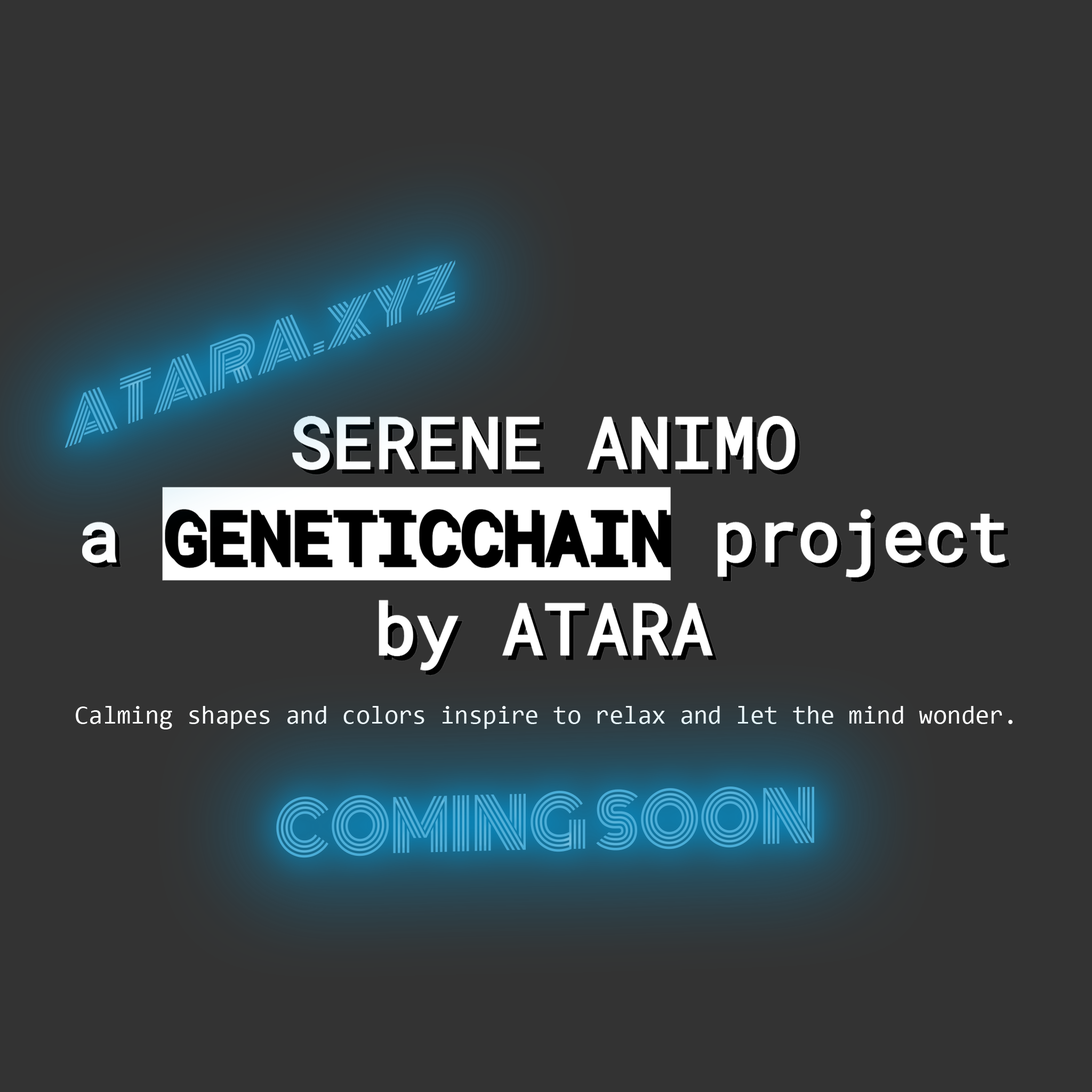
<style>
.page{position:relative;width:1092px;height:1092px;background:#333333}
.page>*{position:absolute;margin:0}
.t1{font:59.6px "Monoton-Regular";color:#4aadd7;scale:1.04 1}
.t2{font:25.6px "Consolas";color:#ffffff}
.t3{font:69.2px "Monoton-Regular";color:#4aadd7;scale:0.94 1}
</style>
<div class="page">
<p class="t1" style="left:65px;top:260px;width:390px;height:188px;rotate:-20deg">ATARA.xyz</p>
<p class="t2" style="left:76px;top:706px;width:937px;height:23px">Calming shapes and colors inspire to relax and let the mind wonder.</p>
<p class="t3" style="left:276px;top:786px;width:538px;height:72px;rotate:-1deg">COMING SOON</p>
</div>
